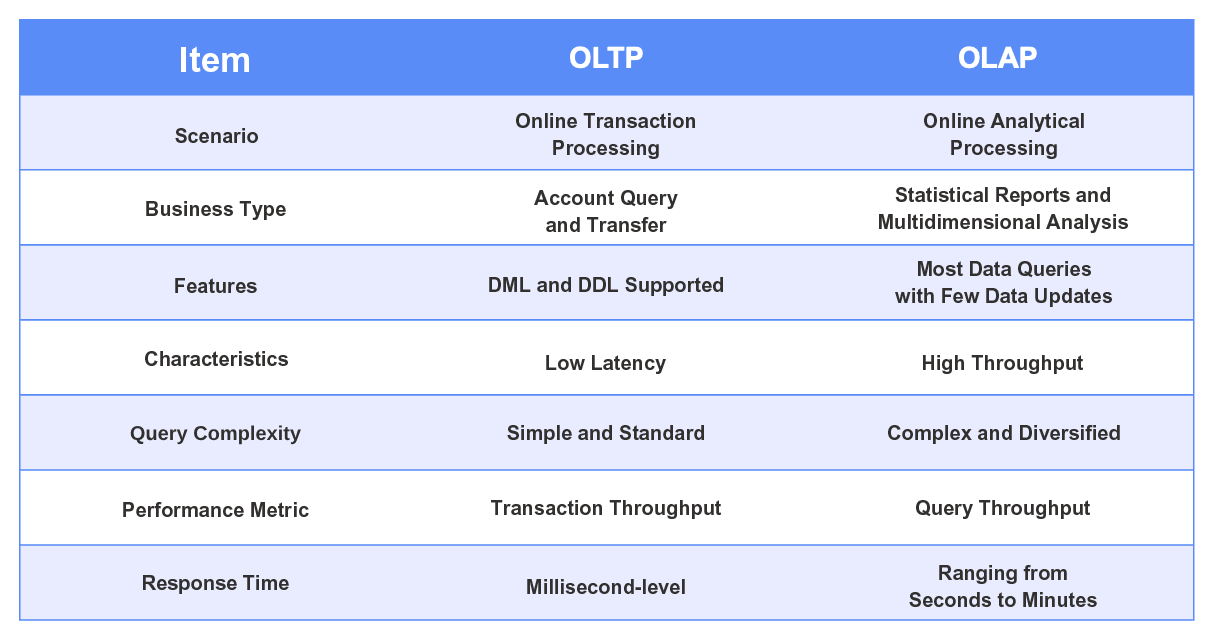
<style>
.page{position:relative;width:1212px;height:636px;background:#ffffff}
.page>*{position:absolute;margin:0}
.t1{font:35px "Arial-BoldMT";color:#ffffff}
.t2{font:20px/27.5px "Arial-BoldMT";color:#32302f}
.t3{font:20px "Arial-BoldMT";color:#32302f}
</style>
<div class="page">
<p class="t1" style="left:181px;top:46px;width:68px;height:26px">Item</p>
<p class="t2" style="left:516px;top:113px;width:179px;height:46px;text-align:center">Online Transaction<br>Processing</p>
<p class="t2" style="left:924px;top:113px;width:160px;height:46px;text-align:center">Online Analytical<br>Processing</p>
<p class="t3" style="left:175px;top:128px;width:83px;height:15px">Scenario</p>
<p class="t2" style="left:534px;top:190px;width:144px;height:42px;text-align:center">Account Query<br>and Transfer</p>
<p class="t2" style="left:879px;top:187px;width:249px;height:46px;text-align:center">Statistical Reports and<br>Multidimensional Analysis</p>
<p class="t3" style="left:146px;top:201px;width:140px;height:19px">Business Type</p>
<p class="t2" style="left:895px;top:261px;width:217px;height:46px;text-align:center">Most Data Queries<br>with Few Data Updates</p>
<p class="t3" style="left:175px;top:278px;width:82px;height:15px">Features</p>
<p class="t3" style="left:489px;top:277px;width:234px;height:19px">DML and DDL Supported</p>
<p class="t3" style="left:145px;top:351px;width:143px;height:15px">Characteristics</p>
<p class="t3" style="left:546px;top:355px;width:120px;height:19px">Low Latency</p>
<p class="t3" style="left:923px;top:355px;width:160px;height:19px">High Throughput</p>
<p class="t3" style="left:130px;top:425px;width:171px;height:20px">Query Complexity</p>
<p class="t3" style="left:507px;top:425px;width:197px;height:19px">Simple and Standard</p>
<p class="t3" style="left:888px;top:425px;width:232px;height:19px">Complex and Diversified</p>
<p class="t3" style="left:123px;top:502px;width:186px;height:15px">Performance Metric</p>
<p class="t3" style="left:491px;top:500px;width:230px;height:19px">Transaction Throughput</p>
<p class="t3" style="left:916px;top:500px;width:174px;height:19px">Query Throughput</p>
<p class="t2" style="left:909px;top:565px;width:188px;height:42px;text-align:center">Ranging from<br>Seconds to Minutes</p>
<p class="t3" style="left:143px;top:575px;width:146px;height:19px">Response Time</p>
<p class="t3" style="left:527px;top:579px;width:158px;height:15px">Millisecond-level</p>
</div>
